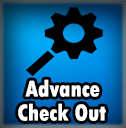
<style>
.page{position:relative;width:126px;height:128px}
.page>*{position:absolute;margin:0}
.t1{font:24px "TwCenMT-CondensedExtraBold";color:#ffffff}
</style>
<div class="page">
<p class="t1" style="left:25px;top:79px;width:75px;height:18px">Advance</p>
<p class="t1" style="left:18px;top:103px;width:88px;height:18px">Check Out</p>
</div>
